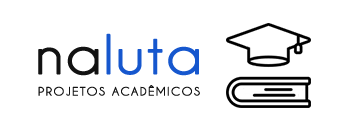
<style>
.page{position:relative;width:350px;height:130px;background:#ffffff}
.page>*{position:absolute;margin:0}
.t1{font:50px "CaviarDreams";color:#1657ce;font-weight:bold;scale:1.1 1}
.t2{font:50px "CaviarDreams";color:#121212;font-weight:bold;scale:1.1 1}
.t3{font:10.7px "CaviarDreams";letter-spacing:0.1em;color:#121212;text-transform:uppercase;font-weight:bold;scale:1.1 1}
</style>
<div class="page">
<p class="t1" style="left:38px;top:33px;width:161px;height:43px"><span class="t2">na</span>luta</p>
<p class="t3" style="left:38px;top:85px;width:162px;height:11px">Projetos Acadêmicos</p>
</div>
